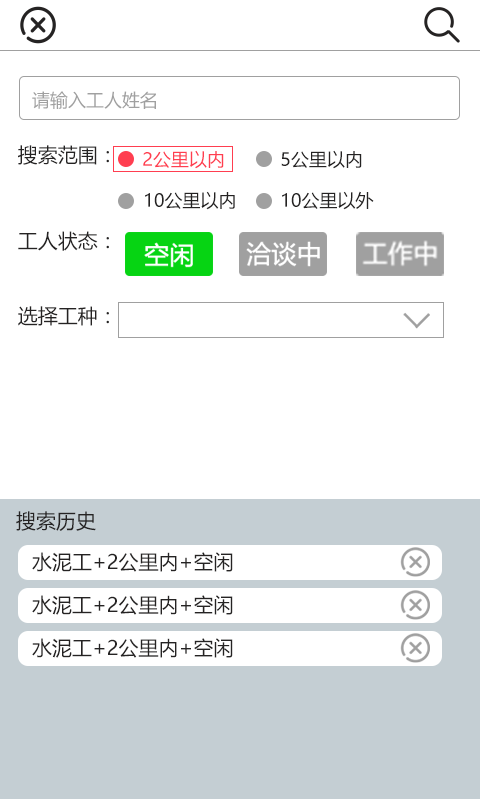
<style>
.page{position:relative;width:480px;height:800px;background:#ffffff}
.page>*{position:absolute;margin:0}
.t1{font:18px "MicrosoftYaHei";color:#a0a0a0}
.t2{font:20px "MicrosoftYaHei";color:#252323}
.t3{font:18px "MicrosoftYaHei";color:#ff3e50}
.t4{font:18px "MicrosoftYaHei";color:#252323}
</style>
<div class="page">
<p class="t1" style="left:32px;top:91px;width:124px;height:18px">请输入工人姓名</p>
<p class="t2" style="left:18px;top:145px;width:91px;height:20px">搜索范围：</p>
<p class="t3" style="left:143px;top:150px;width:81px;height:19px">2公里以内</p>
<p class="t4" style="left:281px;top:150px;width:81px;height:19px">5公里以内</p>
<p class="t4" style="left:145px;top:191px;width:90px;height:19px">10公里以内</p>
<p class="t4" style="left:282px;top:191px;width:92px;height:19px">10公里以外</p>
<p class="t2" style="left:18px;top:231px;width:91px;height:20px">工人状态：</p>
<p class="t2" style="left:18px;top:306px;width:91px;height:20px">选择工种：</p>
<p class="t2" style="left:16px;top:511px;width:80px;height:20px">搜索历史</p>
<p class="t2" style="left:32px;top:552px;width:201px;height:20px">水泥工+2公里内+空闲</p>
<p class="t2" style="left:32px;top:595px;width:201px;height:20px">水泥工+2公里内+空闲</p>
<p class="t2" style="left:32px;top:638px;width:201px;height:20px">水泥工+2公里内+空闲</p>
</div>
